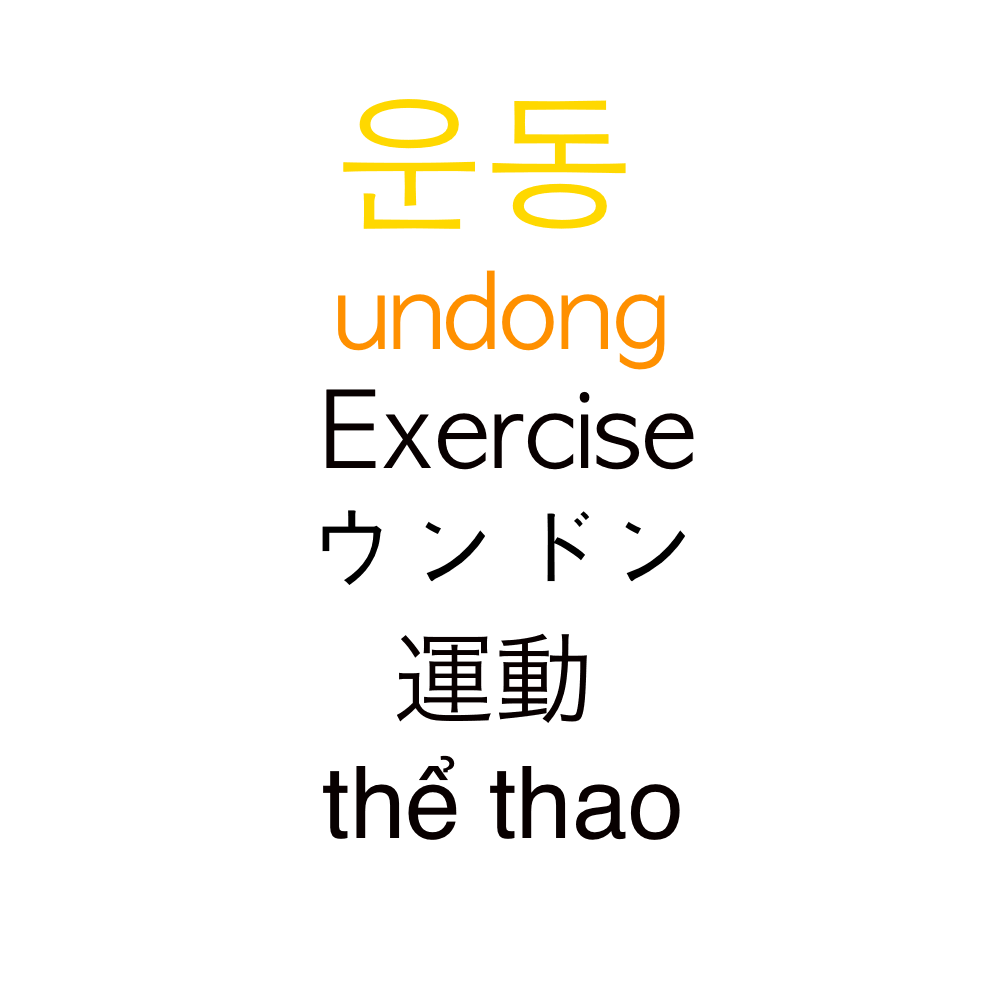
<style>
.page{position:relative;width:1000px;height:1000px;background:#ffffff}
.page>*{position:absolute;margin:0}
.t1{font:150px "AppleGothic";color:#ffd800}
.t2{font:100px "AppleGothic";color:#ff9000}
.t3{font:100px "AppleGothic";color:#080000}
.t4{font:100px "AppleGothic";color:#000000}
.t5{font:100px "HiraKakuProN-W3";color:#080000}
.t6{font:100px "Helvetica";color:#080000}
</style>
<div class="page">
<p class="t1" style="left:343px;top:99px;width:283px;height:130px">운동</p>
<p class="t2" style="left:338px;top:270px;width:327px;height:100px">undong</p>
<p class="t3" style="left:326px;top:389px;width:368px;height:81px">Exercise</p>
<p class="t4" style="left:322px;top:510px;width:363px;height:75px">ウンドン</p>
<p class="t5" style="left:397px;top:633px;width:190px;height:90px">運動</p>
<p class="t6" style="left:323px;top:755px;width:357px;height:85px">thể thao</p>
</div>
